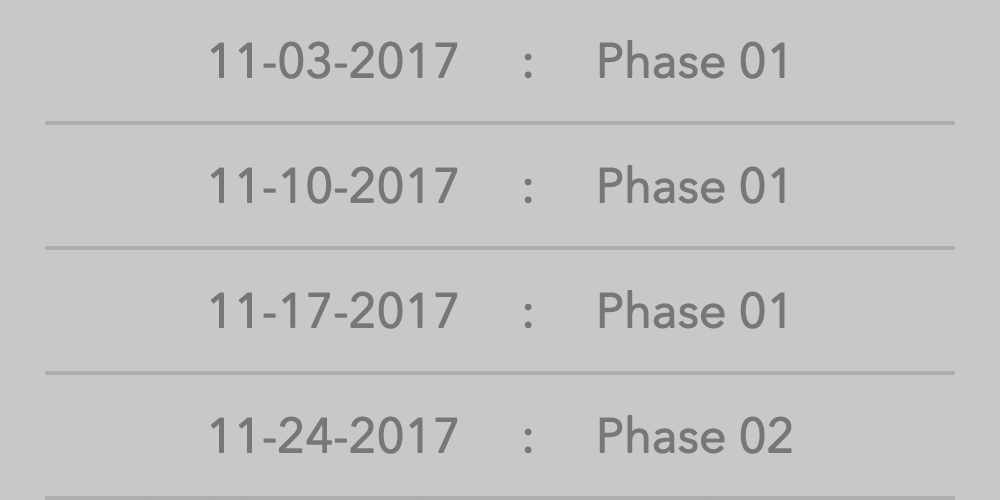
<style>
.page{position:relative;width:1000px;height:500px;background:#c8c8c8}
.page>*{position:absolute;margin:0}
.t1{font:48px "AvenirNextLTPro-Regular";letter-spacing:-0.025em;color:#777777;font-weight:bold}
</style>
<div class="page">
<p class="t1" style="left:211px;top:40px;width:574px;height:39px">11-03-2017     :     Phase 01</p>
<p class="t1" style="left:211px;top:165px;width:574px;height:39px">11-10-2017     :     Phase 01</p>
<p class="t1" style="left:211px;top:290px;width:574px;height:39px">11-17-2017     :     Phase 01</p>
<p class="t1" style="left:211px;top:415px;width:581px;height:39px">11-24-2017     :     Phase 02</p>
</div>
